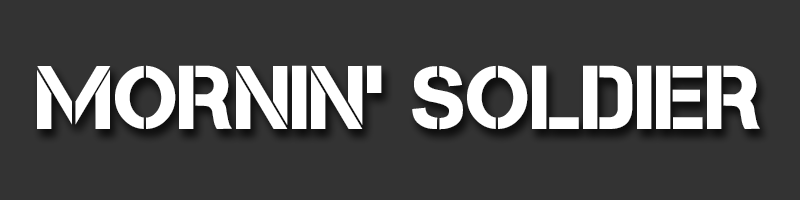
<style>
.page{position:relative;width:800px;height:200px;background:#333333}
.page>*{position:absolute;margin:0}
.t1{font:90px "Cleanwork";color:#ffffff}
</style>
<div class="page">
<p class="t1" style="left:37px;top:65px;width:723px;height:65px">mornin’ soldier</p>
</div>
